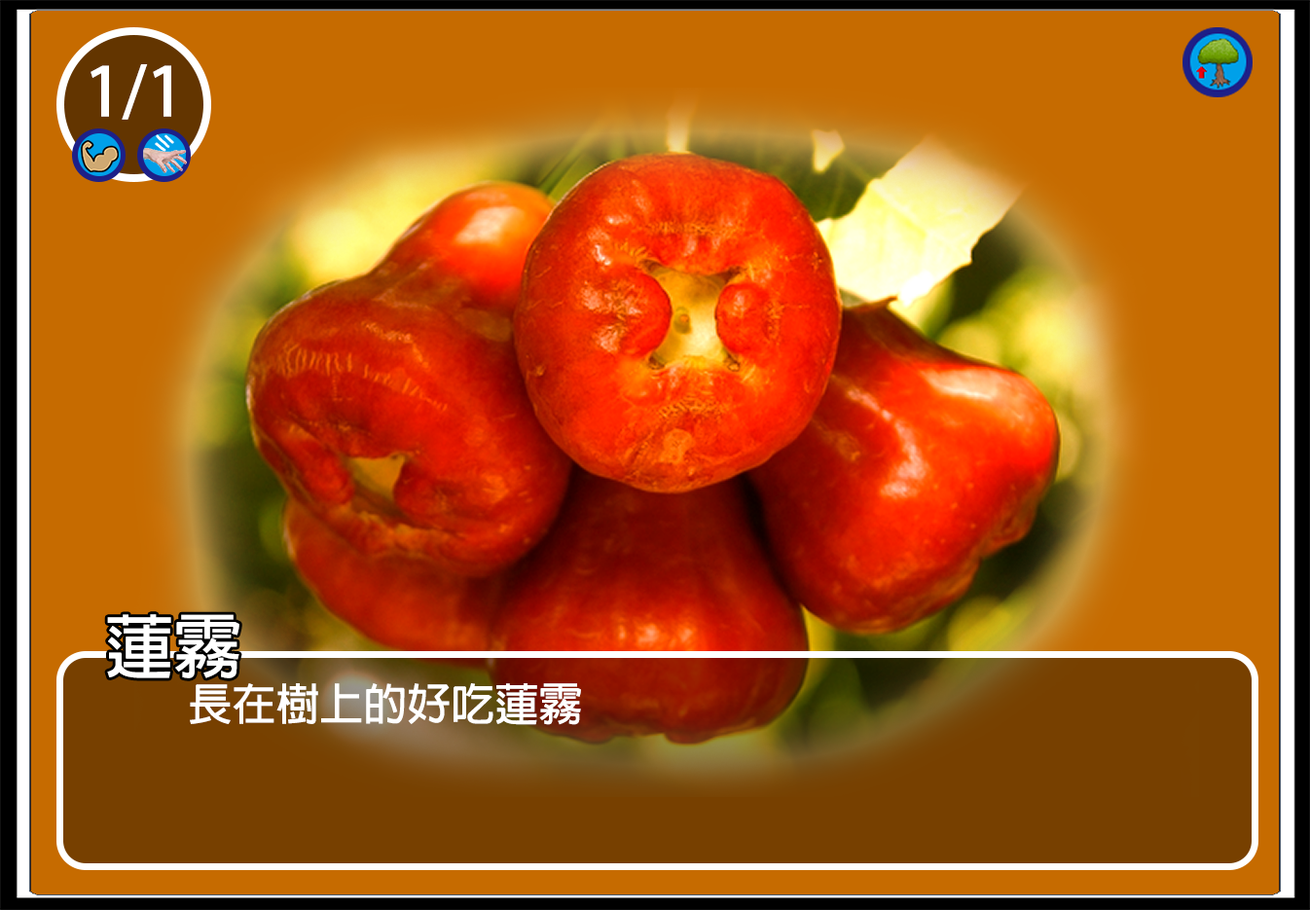
<style>
.page{position:relative;width:1310px;height:910px;background:#c66b00}
.page>*{position:absolute;margin:0}
.t1{font:66.9px "AdobeFanHeitiStd-Bold";color:#ffffff}
.t2{font:68.1px "AdobeFanHeitiStd-Bold";color:#ffffff}
.t3{font:43.8px "AdobeFanHeitiStd-Bold";color:#ffffff}
</style>
<div class="page">
<p class="t1" style="left:91px;top:64px;width:80px;height:56px">1/1</p>
<p class="t2" style="left:107px;top:614px;width:132px;height:64px">蓮霧</p>
<p class="t3" style="left:190px;top:683px;width:391px;height:42px">長在樹上的好吃蓮霧</p>
</div>
